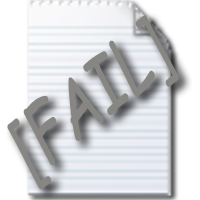
<style>
.page{position:relative;width:200px;height:200px;background:#ffffff}
.page>*{position:absolute;margin:0}
.t1{font:77.2px "ComicSansMS";color:#878683;scale:0.76 1}
</style>
<div class="page">
<p class="t1" style="left:7px;top:15px;width:172px;height:175px;rotate:-39deg">[FAIL]</p>
</div>
